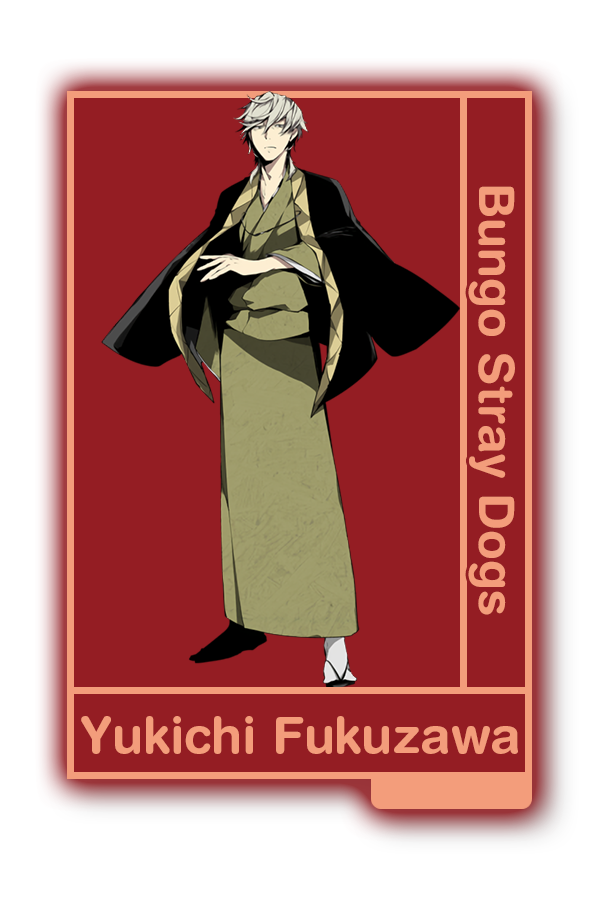
<style>
.page{position:relative;width:600px;height:900px;background:#941d23}
.page>*{position:absolute;margin:0}
.t1{font:48.8px "HelveticaRounded-Bold";color:#f39d7b}
.t2{font:50.5px "HelveticaRounded-Bold";color:#f39d7b}
</style>
<div class="page">
<p class="t1" style="left:468px;top:186px;width:47px;height:429px;rotate:90deg">Bungo Stray Dogs</p>
<p class="t2" style="left:81px;top:716px;width:437px;height:38px">Yukichi Fukuzawa</p>
</div>
